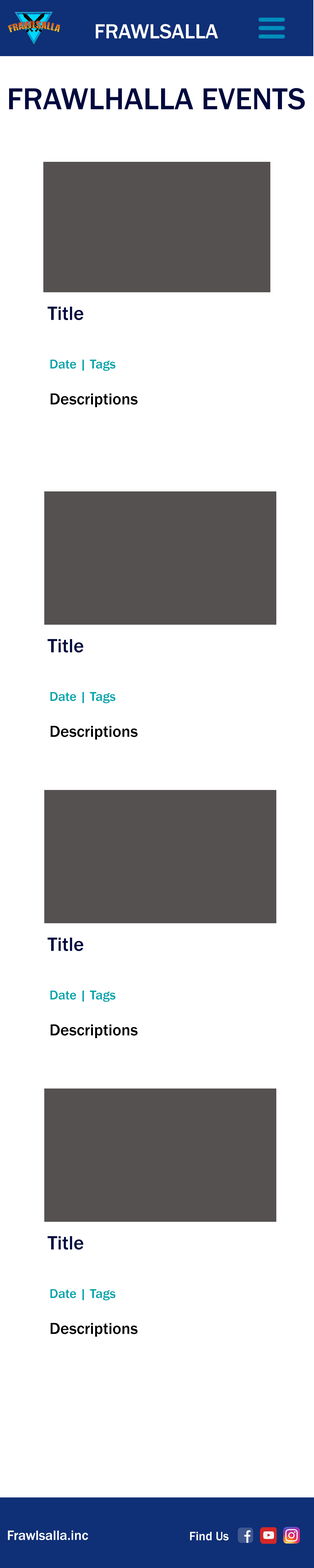
<style>
.page{position:relative;width:314px;height:1568px;background:#ffffff}
.page>*{position:absolute;margin:0}
.t1{font:21.1px "FranklinGothic-Medium";color:#ffffff}
.t2{font:31.4px "FranklinGothic-Medium";color:#00093e}
.t3{font:20px "FranklinGothic-Medium";color:#00093e}
.t4{font:16.7px "FranklinGothic-Medium";color:#000000}
.t5{font:13.3px "FranklinGothic-Medium";color:#00a4aa}
.t6{font:14px "FranklinGothic-Medium";color:#ffffff}
.t7{font:12.7px "FranklinGothic-Medium";color:#ffffff}
</style>
<div class="page">
<p class="t1" style="left:96px;top:24px;width:122px;height:15px">FRAWLSALLA</p>
<p class="t2" style="left:9px;top:88px;width:296px;height:22px">FRAWLHALLA EVENTS</p>
<p class="t3" style="left:47px;top:306px;width:36px;height:14px">Title</p>
<p class="t4" style="left:50px;top:359px;width:87px;height:48px"><span class="t5">Date | Tags<br><br></span>Descriptions</p>
<p class="t3" style="left:47px;top:639px;width:36px;height:14px">Title</p>
<p class="t4" style="left:50px;top:692px;width:87px;height:48px"><span class="t5">Date | Tags<br><br></span>Descriptions</p>
<p class="t3" style="left:47px;top:937px;width:36px;height:14px">Title</p>
<p class="t4" style="left:50px;top:990px;width:87px;height:48px"><span class="t5">Date | Tags<br><br></span>Descriptions</p>
<p class="t3" style="left:47px;top:1236px;width:36px;height:14px">Title</p>
<p class="t4" style="left:50px;top:1289px;width:87px;height:48px"><span class="t5">Date | Tags<br><br></span>Descriptions</p>
<p class="t6" style="left:8px;top:1530px;width:80px;height:10px">Frawlsalla.inc</p>
<p class="t7" style="left:190px;top:1532px;width:38px;height:8px">Find Us</p>
</div>
